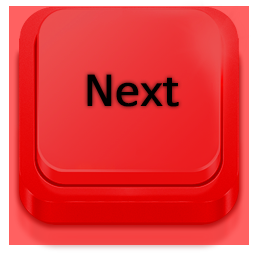
<style>
.page{position:relative;width:256px;height:256px}
.page>*{position:absolute;margin:0}
.t1{font:40.7px "NanumBarunGothic";letter-spacing:0.015em;color:#000000;font-weight:bold}
</style>
<div class="page">
<p class="t1" style="left:87px;top:74px;width:92px;height:33px">Next</p>
</div>
